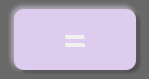
<style>
.page{position:relative;width:149px;height:79px;background:#deccef}
.page>*{position:absolute;margin:0}
.t1{font:41px "ArialMT";color:#f1f1f1}
</style>
<div class="page">
<p class="t1" style="left:65px;top:35px;width:20px;height:12px">=</p>
</div>
